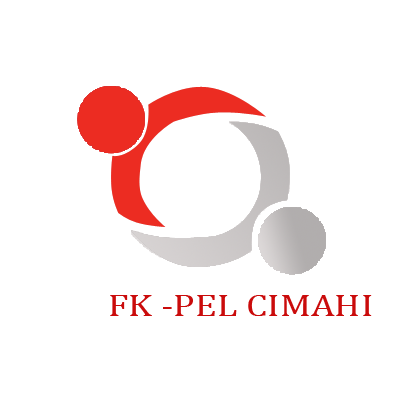
<style>
.page{position:relative;width:400px;height:400px;background:#ffffff}
.page>*{position:absolute;margin:0}
.t1{font:31.2px "Cambria";color:#ca0b0b;scale:1.22 1}
</style>
<div class="page">
<p class="t1" style="left:110px;top:295px;width:262px;height:21px">FK -PEL CIMAHI</p>
</div>
